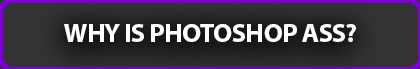
<style>
.page{position:relative;width:420px;height:69px}
.page>*{position:absolute;margin:0}
.t1{font:26.7px "MyriadPro-Bold";letter-spacing:-0.04em;color:#ffffff;text-transform:uppercase}
</style>
<div class="page">
<p class="t1" style="left:64px;top:24px;width:292px;height:18px">why is photoshop ass?</p>
</div>
